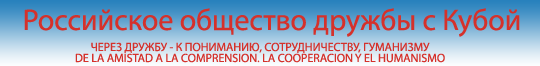
<style>
.page{position:relative;width:540px;height:66px}
.page>*{position:absolute;margin:0}
.t1{font:30px "MyriadPro-Regular";color:#d5312b}
.t2{font:12px "MyriadPro-Regular";color:#d5312b}
</style>
<div class="page">
<p class="t1" style="left:24px;top:8px;width:496px;height:29px">Российское общество дружбы с Кубой</p>
<p class="t2" style="left:75px;top:53px;width:370px;height:10px">DE LA AMISTAD A LA COMPRENSION. LA COOPERACION Y EL HUMANISMO</p>
<p class="t2" style="left:91px;top:42px;width:339px;height:11px">ЧЕРЕЗ ДРУЖБУ - К ПОНИМАНИЮ, СОТРУДНИЧЕСТВУ, ГУМАНИЗМУ</p>
</div>
